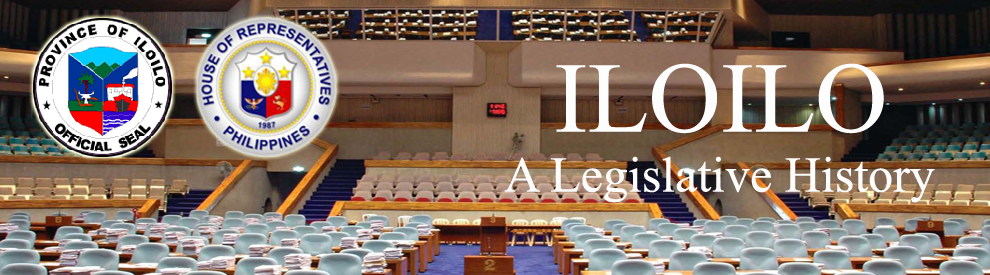
<style>
.page{position:relative;width:990px;height:275px}
.page>*{position:absolute;margin:0}
.t1{font:50px "TimesNewRomanPSMT";color:#fdfcfc}
.t2{font:100px "TimesNewRomanPSMT";color:#fdfdfd}
</style>
<div class="page">
<p class="t1" style="left:504px;top:63px;width:431px;height:140px;text-align:center"><span class="t2">ILOILO<br></span>A Legislative History</p>
</div>
